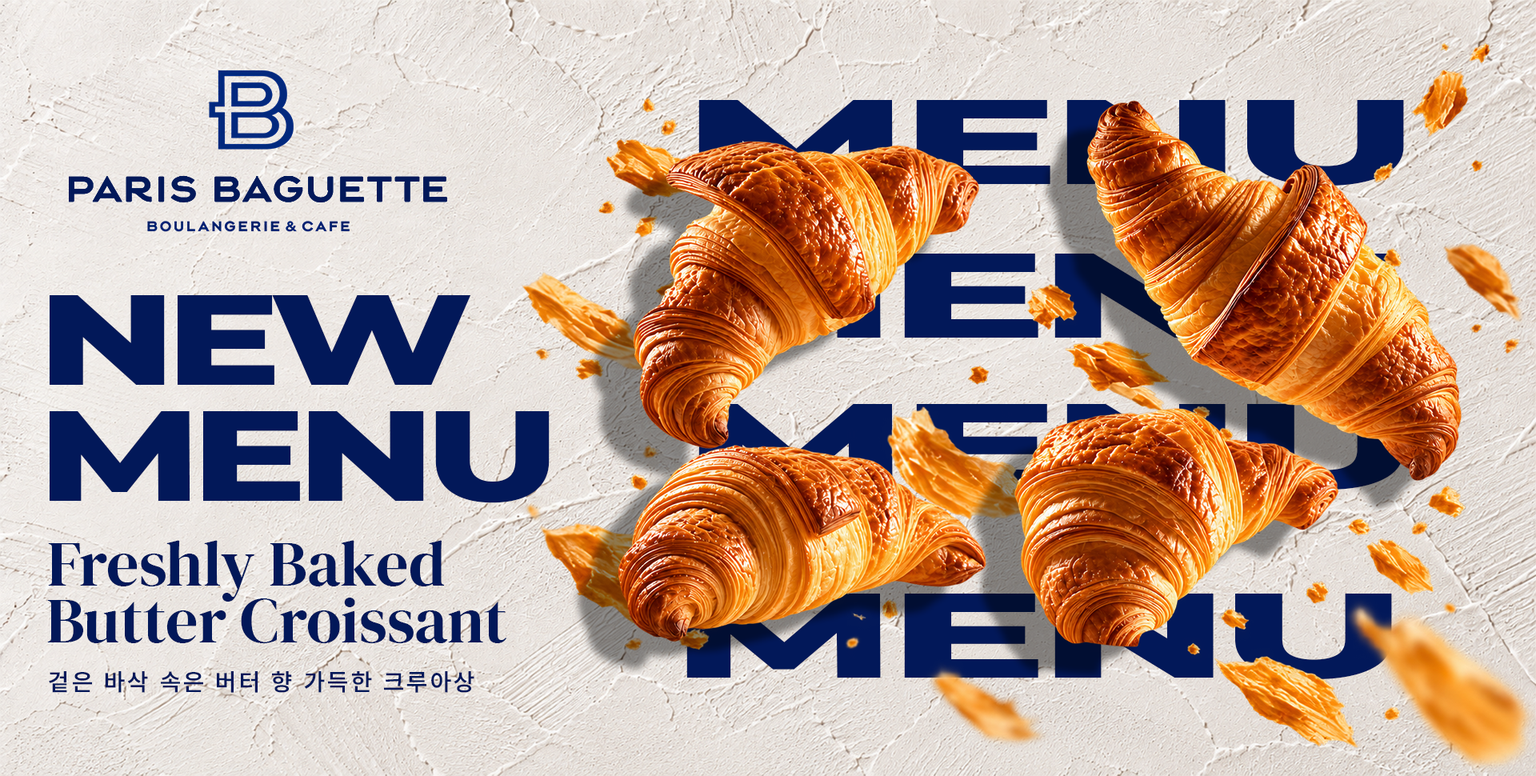
<style>
.page{position:relative;width:1536px;height:776px}
.page>*{position:absolute;margin:0}
.t1{font:120px "Montserrat-ExtraBold";letter-spacing:-0.04em;color:#021859;text-transform:uppercase;scale:1.98 1}
.t2{font:120px "Montserrat-ExtraBold";letter-spacing:-0.04em;text-transform:uppercase;scale:1.98 1}
.t3{font:128px "Montserrat-ExtraBold";letter-spacing:-0.06em;color:#021859;scale:1.34 1}
.t4{font:128px "Montserrat-ExtraBold";letter-spacing:-0.06em;color:#021859;text-transform:uppercase;scale:1.34 1}
.t5{font:64px "DMSerifDisplay-Regular";color:#021859}
.t6{font:24px "Pretendard-SemiBold";letter-spacing:0.12em;color:#021859}
</style>
<div class="page">
<p class="t1" style="left:699px;top:100px;width:705px;height:86px">menu</p>
<p class="t2" style="left:687px;top:254px;width:705px;height:86px">menu</p>
<p class="t3" style="left:50px;top:295px;width:421px;height:90px">NEW</p>
<p class="t4" style="left:50px;top:411px;width:500px;height:92px">menu</p>
<p class="t2" style="left:699px;top:404px;width:705px;height:87px">menu</p>
<p class="t5" style="left:48px;top:540px;width:396px;height:62px">Freshly Baked</p>
<p class="t1" style="left:687px;top:594px;width:705px;height:86px">menu</p>
<p class="t5" style="left:47px;top:598px;width:460px;height:45px">Butter Croissant</p>
<p class="t6" style="left:49px;top:671px;width:425px;height:22px">겉은 바삭 속은 버터 향 가득한 크루아상</p>
</div>
